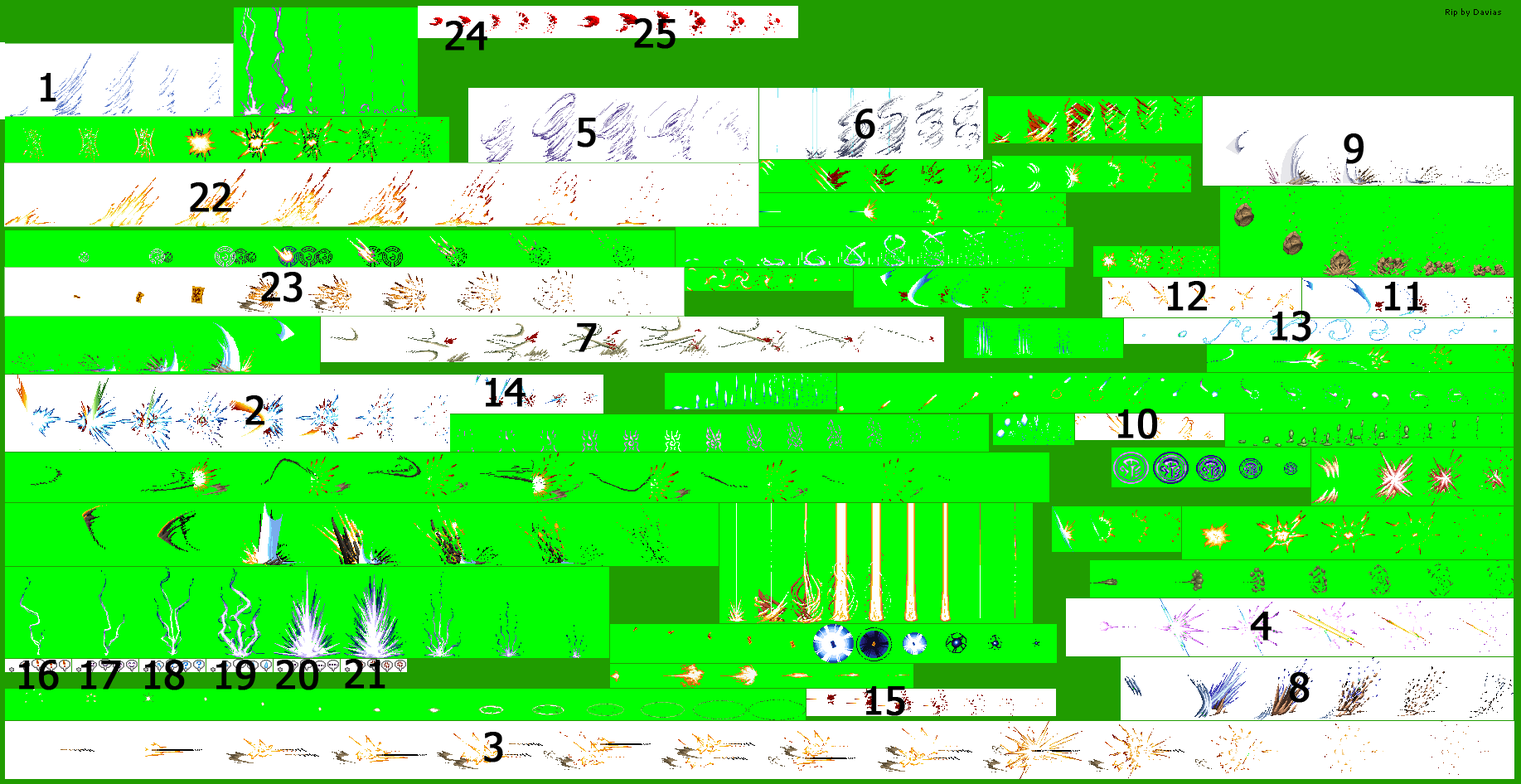
<style>
.page{position:relative;width:1521px;height:784px;background:#00ff00}
.page>*{position:absolute;margin:0}
.t1{font:39.3px "Tahoma";color:#000000;font-weight:bold}
</style>
<div class="page">
<p class="t1" style="left:445px;top:21px;width:42px;height:30px">24</p>
<p class="t1" style="left:634px;top:18px;width:41px;height:31px">25</p>
<p class="t1" style="left:41px;top:73px;width:15px;height:29px">1</p>
<p class="t1" style="left:855px;top:109px;width:20px;height:30px">6</p>
<p class="t1" style="left:577px;top:118px;width:19px;height:30px">5</p>
<p class="t1" style="left:1343px;top:133px;width:21px;height:31px">9</p>
<p class="t1" style="left:190px;top:182px;width:41px;height:30px">22</p>
<p class="t1" style="left:261px;top:272px;width:42px;height:31px">23</p>
<p class="t1" style="left:1168px;top:281px;width:39px;height:30px">12</p>
<p class="t1" style="left:1385px;top:282px;width:38px;height:29px">11</p>
<p class="t1" style="left:1272px;top:311px;width:39px;height:30px">13</p>
<p class="t1" style="left:577px;top:323px;width:20px;height:29px">7</p>
<p class="t1" style="left:486px;top:378px;width:39px;height:29px">14</p>
<p class="t1" style="left:245px;top:395px;width:19px;height:30px">2</p>
<p class="t1" style="left:1118px;top:409px;width:40px;height:30px">10</p>
<p class="t1" style="left:1250px;top:612px;width:21px;height:29px">4</p>
<p class="t1" style="left:19px;top:660px;width:40px;height:30px">16</p>
<p class="t1" style="left:81px;top:661px;width:40px;height:29px">17</p>
<p class="t1" style="left:145px;top:660px;width:40px;height:30px">18</p>
<p class="t1" style="left:216px;top:660px;width:40px;height:30px">19</p>
<p class="t1" style="left:276px;top:660px;width:43px;height:30px">20</p>
<p class="t1" style="left:345px;top:659px;width:40px;height:30px">21</p>
<p class="t1" style="left:1289px;top:672px;width:21px;height:31px">8</p>
<p class="t1" style="left:866px;top:686px;width:39px;height:30px">15</p>
<p class="t1" style="left:484px;top:732px;width:19px;height:31px">3</p>
</div>
